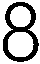
<style>
.page{position:relative;width:40px;height:64px;background:#ffffff}
.page>*{position:absolute;margin:0}
.t1{font:74px "OPPOSans-R";color:#000000}
</style>
<div class="page">
<p class="t1" style="left:3px;top:2px;width:36px;height:60px">8</p>
</div>
